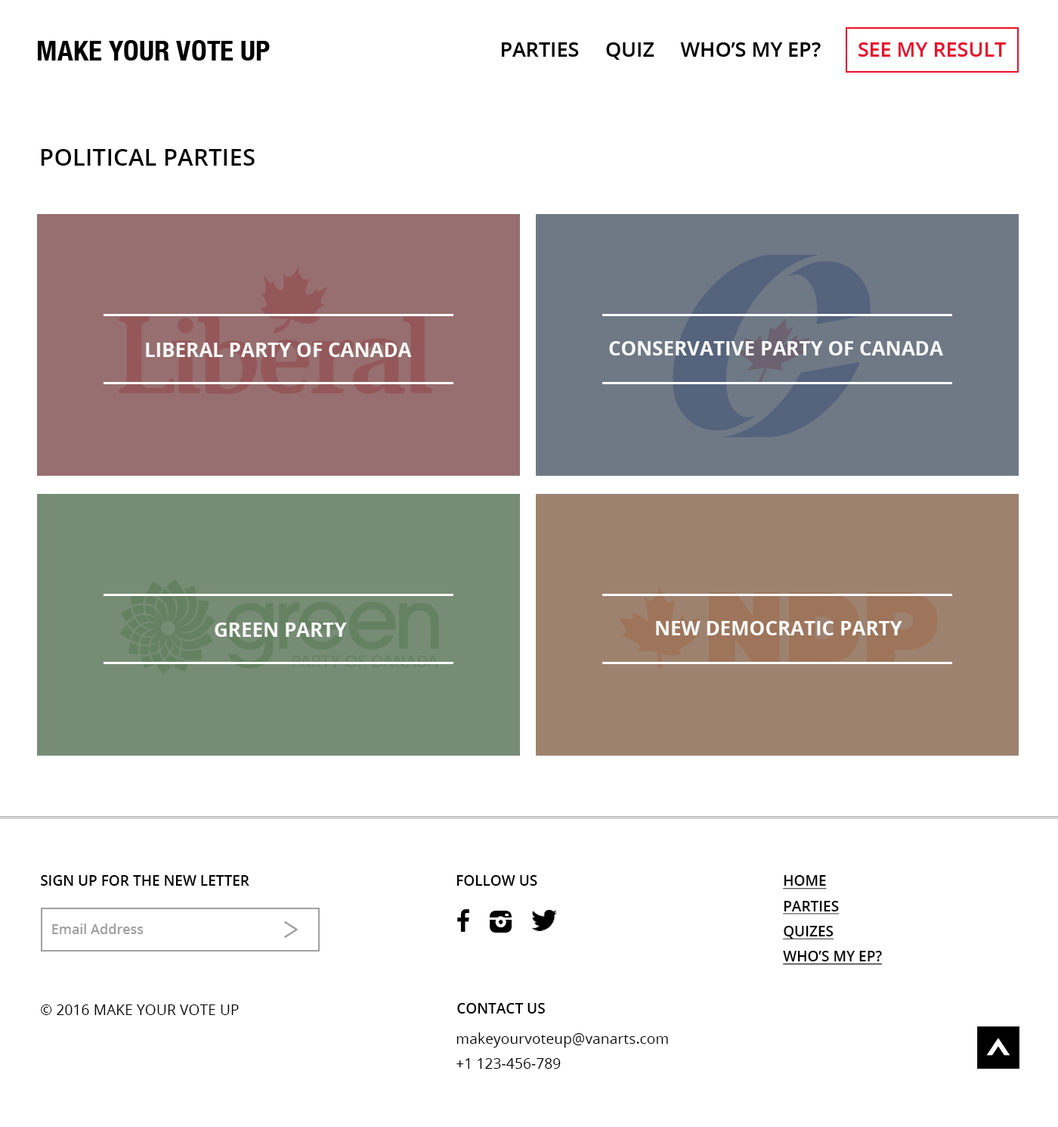
<style>
.page{position:relative;width:1058px;height:1127px;background:#ffffff}
.page>*{position:absolute;margin:0}
.t1{font:28.2px "HelveticaNeue-CondensedBold";color:#000000}
.t2{font:20.3px "OpenSans-Semibold";color:#000000}
.t3{font:20.3px "OpenSans-Semibold";color:#e8112d}
.t4{font:23.7px "OpenSans-Semibold";color:#000000}
.t5{font:19.7px "OpenSans-Bold";color:#f8f8f8;text-transform:uppercase}
.t6{font:14.4px "OpenSans-Semibold";color:#000000}
.t7{font:14.4px "OpenSans-Semibold";color:#000000;text-decoration:underline}
.t8{font:13.6px "OpenSans-Semibold";color:#a0a0a0}
.t9{font:14.6px "OpenSans";color:#000000}
</style>
<div class="page">
<p class="t1" style="left:38px;top:40px;width:232px;height:20px">MAKE YOUR VOTE UP</p>
<p class="t2" style="left:502px;top:42px;width:504px;height:18px">PARTIES     QUIZ     WHO’S MY EP?       <span class="t3">SEE MY RESULT</span></p>
<p class="t4" style="left:41px;top:149px;width:214px;height:17px">POLITICAL PARTIES</p>
<p class="t5" style="left:609px;top:341px;width:335px;height:14px">Conservative Party of Canada</p>
<p class="t5" style="left:146px;top:342px;width:266px;height:15px">Liberal Party of Canada</p>
<p class="t5" style="left:215px;top:622px;width:132px;height:15px">Green Party</p>
<p class="t5" style="left:656px;top:621px;width:247px;height:14px">New Democratic Party</p>
<p class="t6" style="left:41px;top:875px;width:209px;height:10px">SIGN UP FOR THE NEW LETTER</p>
<p class="t6" style="left:457px;top:875px;width:81px;height:10px">FOLLOW US</p>
<p class="t7" style="left:783px;top:875px;width:100px;height:89px">HOME<br>PARTIES<br>QUIZES<br>WHO’S MY EP?</p>
<p class="t8" style="left:52px;top:923px;width:92px;height:11px">Email Address</p>
<p class="t9" style="left:41px;top:1004px;width:198px;height:11px">© 2016 MAKE YOUR VOTE UP</p>
<p class="t6" style="left:457px;top:1003px;width:88px;height:10px">CONTACT US</p>
<p class="t9" style="left:457px;top:1032px;width:211px;height:36px">makeyourvoteup@vanarts.com<br>+1 123-456-789</p>
</div>
